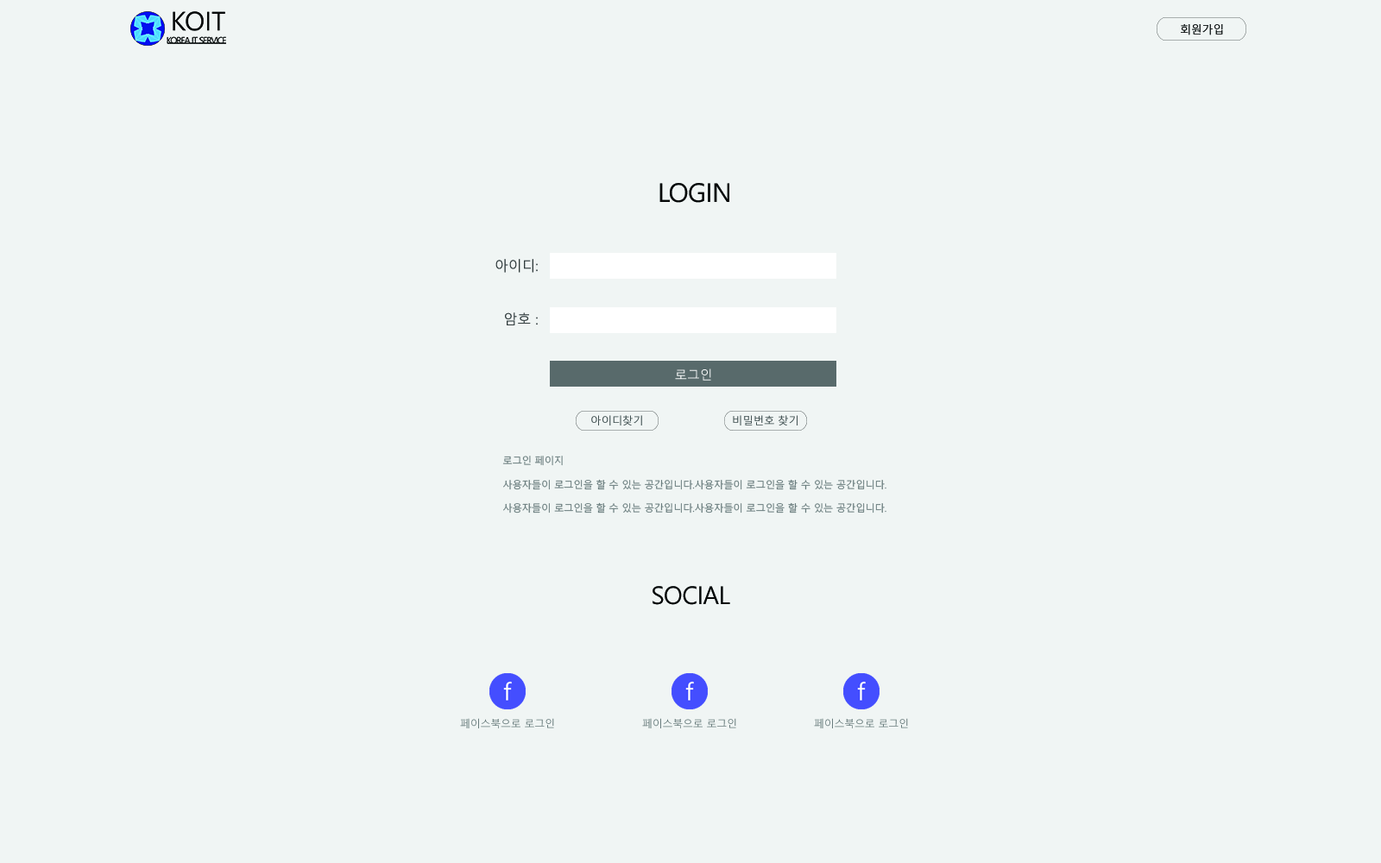
<style>
.page{position:relative;width:1381px;height:863px;background:#f0f5f4}
.page>*{position:absolute;margin:0}
.t1{font:11.2px "MalgunGothic";letter-spacing:-0.02em;color:#060808}
.t2{font:25.9px "MalgunGothic";letter-spacing:-0.02em;color:#060808}
.t3{font:13.8px/53.2px "MalgunGothic";letter-spacing:-0.02em;color:#2f393a}
.t4{font:12.8px "MalgunGothic";letter-spacing:-0.02em;color:#ffffff}
.t5{font:10.6px "MalgunGothic";letter-spacing:-0.02em;color:#425051}
.t6{font:9.8px/23.6px "MalgunGothic";letter-spacing:-0.02em;color:#697d7d}
.t7{font:24.5px "MalgunGothic";letter-spacing:-0.02em;color:#060808}
.t8{font:10.4px "MalgunGothic";letter-spacing:-0.02em;color:#697d7d}
</style>
<div class="page">
<p class="t1" style="left:1181px;top:24px;width:42px;height:11px">회원가입</p>
<p class="t2" style="left:660px;top:183px;width:69px;height:20px">LOGIN</p>
<p class="t3" style="left:496px;top:259px;width:42px;height:66px;text-align:right">아이디:<br>암호 :</p>
<p class="t4" style="left:675px;top:369px;width:36px;height:12px">로그인</p>
<p class="t5" style="left:591px;top:415px;width:207px;height:11px">아이디찾기    비밀번호 찾기</p>
<p class="t6" style="left:502px;top:456px;width:385px;height:58px">로그인 페이지<br>사용자들이 로그인을 할 수 있는 공간입니다.사용자들이 로그인을 할 수 있는 공간입니다.<br>사용자들이 로그인을 할 수 있는 공간입니다.사용자들이 로그인을 할 수 있는 공간입니다.</p>
<p class="t7" style="left:653px;top:586px;width:77px;height:19px">SOCIAL</p>
<p class="t8" style="left:460px;top:718px;width:94px;height:11px">페이스북으로 로그인</p>
<p class="t8" style="left:642px;top:718px;width:94px;height:11px">페이스북으로 로그인</p>
<p class="t8" style="left:814px;top:718px;width:94px;height:11px">페이스북으로 로그인</p>
</div>
